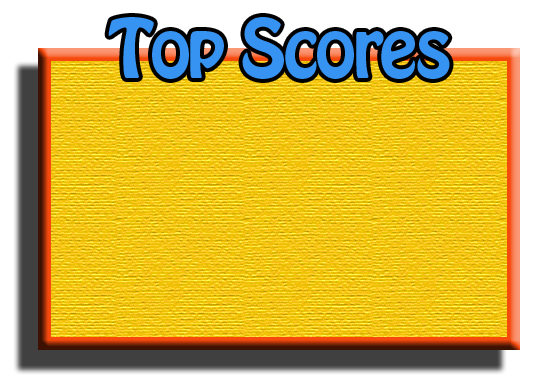
<style>
.page{position:relative;width:550px;height:385px}
.page>*{position:absolute;margin:0}
.t1{font:72px "HoboStd";letter-spacing:-0.04em;color:#3793f2}
</style>
<div class="page">
<p class="t1" style="left:108px;top:17px;width:342px;height:62px">Top Scores</p>
</div>
